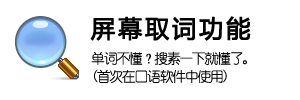
<style>
.page{position:relative;width:300px;height:100px;background:#ffffff}
.page>*{position:absolute;margin:0}
.t1{font:24px "MicrosoftYaHei";letter-spacing:0.1em;color:#000000;font-weight:bold}
.t2{font:14px/18px "YouYuan";letter-spacing:-0.1em;color:#000000}
</style>
<div class="page">
<p class="t1" style="left:90px;top:16px;width:161px;height:25px">屏幕取词功能</p>
<p class="t2" style="left:91px;top:51px;width:156px;height:32px">单词不懂？搜素一下就懂了。<br>(首次在口语软件中使用)</p>
</div>
